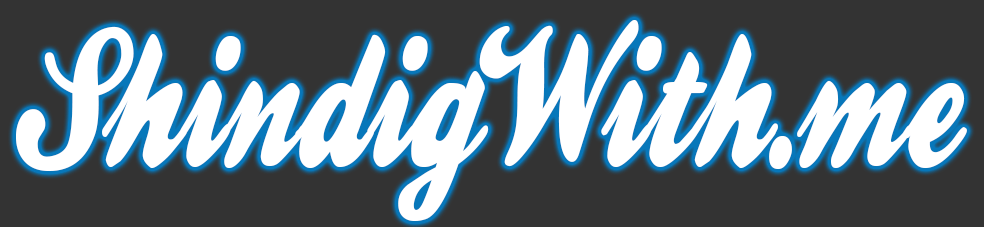
<style>
.page{position:relative;width:984px;height:227px;background:#333333}
.page>*{position:absolute;margin:0}
.t1{font:203.3px "BallparkWeiner";color:#ffffff;scale:0.74 1}
</style>
<div class="page">
<p class="t1" style="left:16px;top:20px;width:951px;height:201px">ShindigWith.me</p>
</div>
